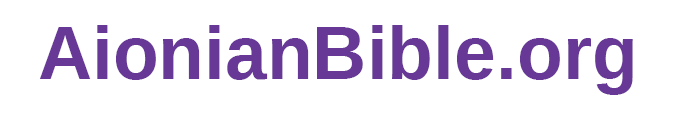
<style>
.page{position:relative;width:675px;height:113px;background:#ffffff}
.page>*{position:absolute;margin:0}
.t1{font:75px "LiberationSans-Bold";color:#673896}
</style>
<div class="page">
<p class="t1" style="left:40px;top:25px;width:593px;height:70px">AionianBible.org</p>
</div>
